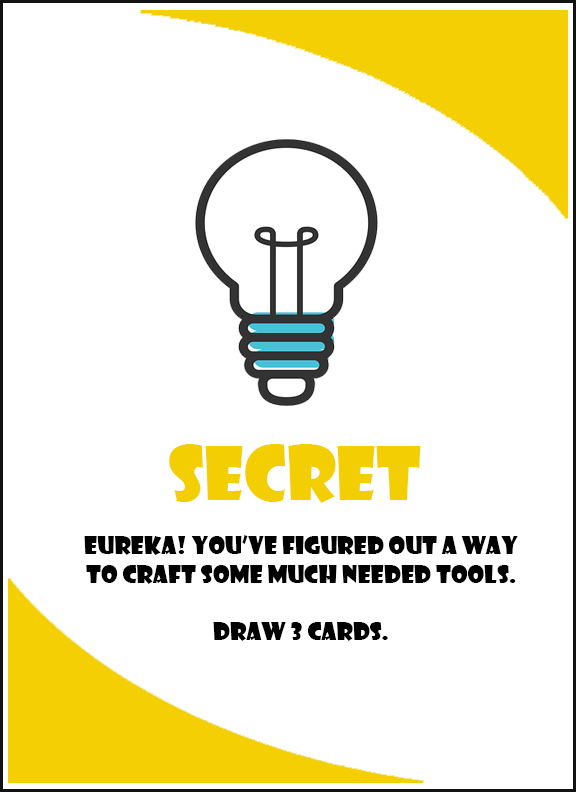
<style>
.page{position:relative;width:576px;height:792px;background:#ffffff}
.page>*{position:absolute;margin:0}
.t1{font:72px "ShowcardGothic-Reg";color:#f3ce03}
.t2{font:24px "ShowcardGothic-Reg";color:#000000}
</style>
<div class="page">
<p class="t1" style="left:169px;top:444px;width:252px;height:59px">SECRET</p>
<p class="t2" style="left:84px;top:535px;width:434px;height:106px;text-align:center">Eureka! You’ve figured out a way to craft some much needed tools. <br><br>Draw 3 cards.</p>
</div>
